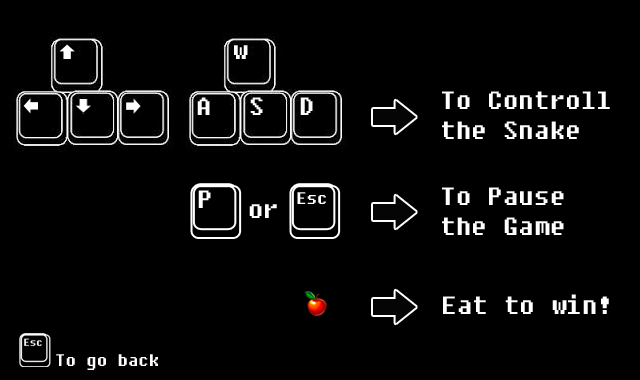
<style>
.page{position:relative;width:640px;height:380px;background:#000000}
.page>*{position:absolute;margin:0}
.t1{font:25px "Fixedsys";color:#ffffff}
.t2{font:16.7px "Fixedsys";color:#ffffff}
</style>
<div class="page">
<p class="t1" style="left:442px;top:91px;width:168px;height:48px">To Controll <br>the Snake</p>
<p class="t1" style="left:442px;top:187px;width:122px;height:48px">To Pause<br>the Game</p>
<p class="t1" style="left:249px;top:204px;width:28px;height:14px">or</p>
<p class="t1" style="left:443px;top:294px;width:166px;height:20px">Eat to win!</p>
<p class="t2" style="left:56px;top:354px;width:102px;height:16px">To go back</p>
</div>
